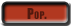
<style>
.page{position:relative;width:71px;height:26px;background:#b13820}
.page>*{position:absolute;margin:0}
.t1{font:14px "Impact";color:#51190e;font-variant:small-caps}
</style>
<div class="page">
<p class="t1" style="left:27px;top:8px;width:20px;height:11px">Pop.</p>
</div>
